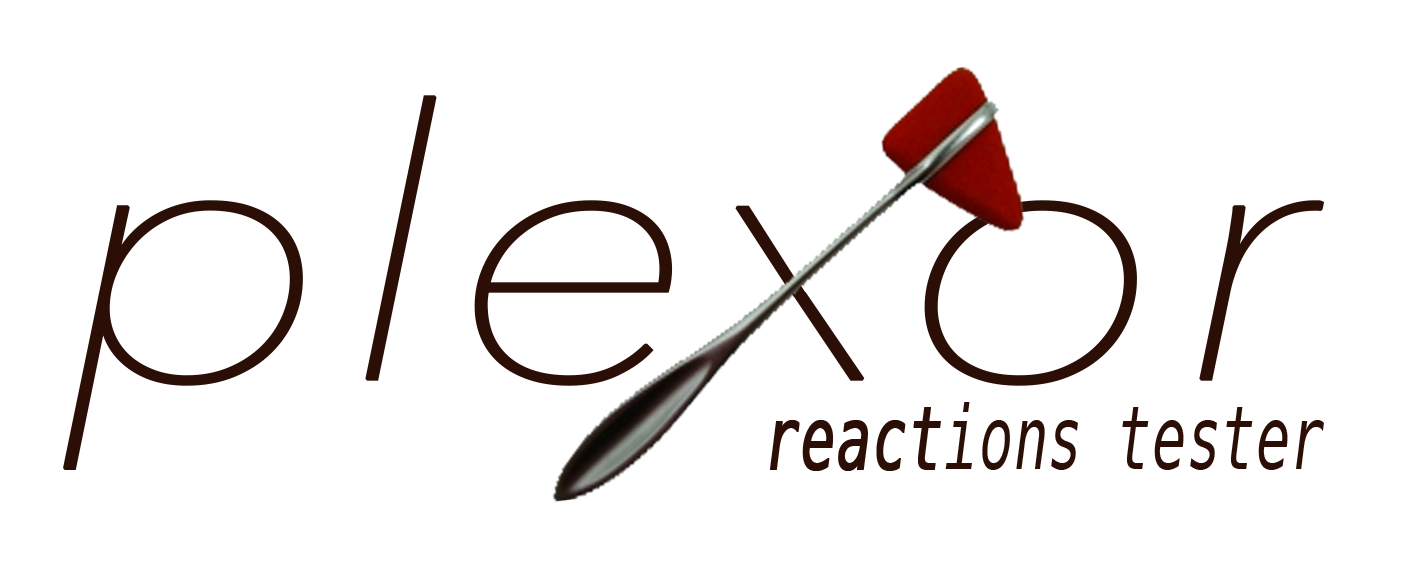
<style>
.page{position:relative;width:1403px;height:580px;background:#ffffff}
.page>*{position:absolute;margin:0}
.t1{font:88.2px "Menlo-Italic";color:#2b0f07;scale:0.65 1}
.t2{font:88.2px "Menlo-Italic";color:#2b0f07;font-weight:bold;scale:0.65 1}
</style>
<div class="page">
<p class="t1" style="left:770px;top:402px;width:554px;height:69px"><span class="t2">react</span>ions tester</p>
</div>
